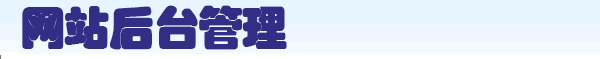
<style>
.page{position:relative;width:600px;height:59px;background:#e6f5ff}
.page>*{position:absolute;margin:0}
.t1{font:46px "STHupo";letter-spacing:-0.06em;color:#322e86;font-weight:bold}
</style>
<div class="page">
<p class="t1" style="left:22px;top:5px;width:265px;height:45px">网站后台管理</p>
</div>
